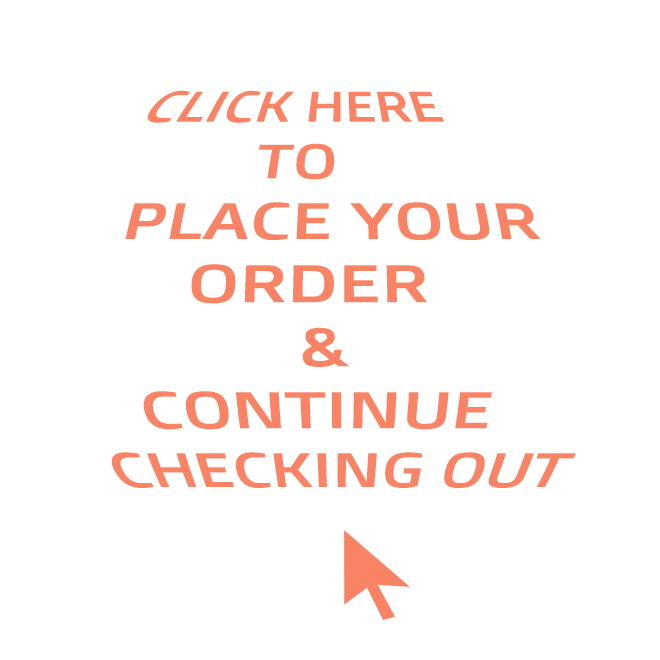
<style>
.page{position:relative;width:660px;height:660px;background:#ffffff}
.page>*{position:absolute;margin:0}
.t1{font:49px "DoppioOne-Regular";color:#f98365}
</style>
<div class="page">
<p class="t1" style="left:111px;top:90px;width:465px;height:398px">CLICK HERE<br>   TO<br>  PLACE YOUR<br>  ORDER <br>    &amp; <br>   CONTINUE <br>CHECKING OUT</p>
</div>
